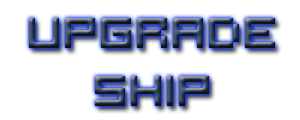
<style>
.page{position:relative;width:300px;height:120px;background:#ffffff}
.page>*{position:absolute;margin:0}
.t1{font:48px "Hooge0553"}
</style>
<div class="page">
<p class="t1" style="left:29px;top:18px;width:246px;height:88px;text-align:center">upgrade<br>ship</p>
</div>
